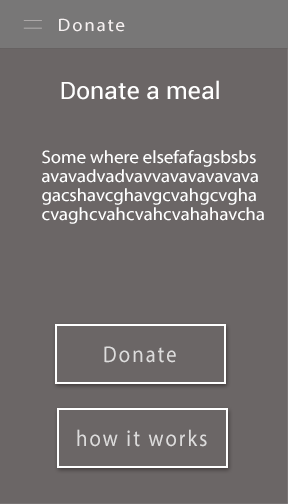
<style>
.page{position:relative;width:288px;height:504px;background:#6b6666}
.page>*{position:absolute;margin:0}
.t1{font:18px "MyriadPro-Regular";letter-spacing:0.1em;color:#f6f1f1;scale:1.04 1}
.t2{font:24px "Roboto-Regular";color:#ffffff;scale:1.04 1}
.t3{font:18px/18.9px "MyriadPro-Regular";color:#ffffff;scale:1.04 1}
.t4{font:23px "MyriadPro-Regular";letter-spacing:0.1em;color:#dddcdc;scale:0.89 1}
</style>
<div class="page">
<p class="t1" style="left:59px;top:18px;width:66px;height:14px">Donate</p>
<p class="t2" style="left:61px;top:80px;width:158px;height:20px">Donate a meal</p>
<p class="t3" style="left:42px;top:150px;width:222px;height:74px">Some where elsefafagsbsbs<br>avavadvadvavvavavavavava<br>gacshavcghavgcvahgcvgha<br>cvaghcvahcvahcvahahavcha</p>
<p class="t4" style="left:104px;top:346px;width:72px;height:17px">Donate</p>
<p class="t4" style="left:77px;top:429px;width:130px;height:18px">how it works</p>
</div>
